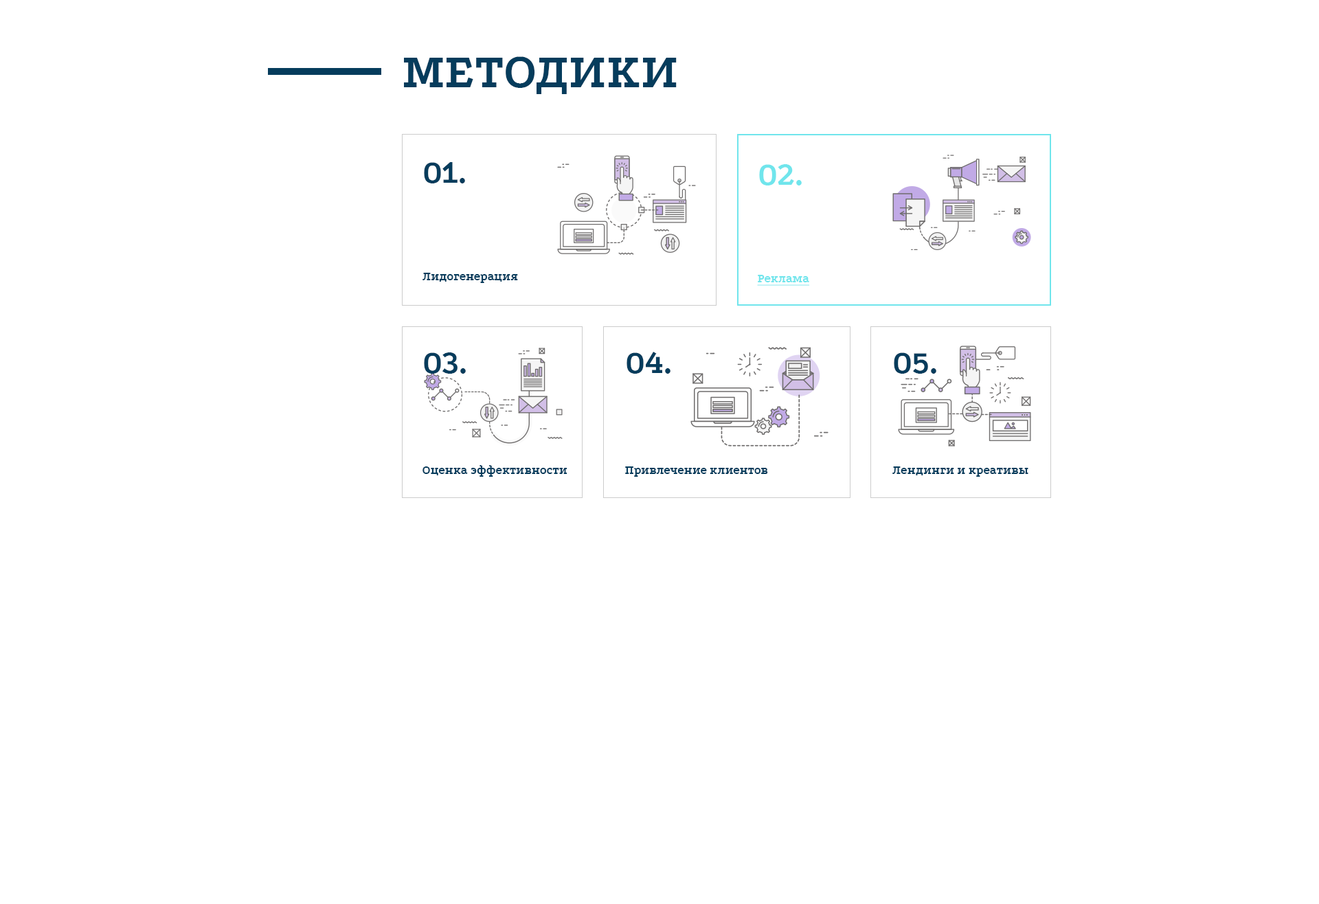
<style>
.page{position:relative;width:1319px;height:904px;background:#ffffff}
.page>*{position:absolute;margin:0}
.t1{font:49.5px "Podkova-Bold";color:#053c5c;text-transform:uppercase}
.t2{font:33px "Podkova-Bold";color:#053c5c}
.t3{font:33px "Podkova-Bold";color:#70e5ec}
.t4{font:12.4px "Podkova-Bold";color:#053c5c}
.t5{font:12.4px "Podkova-Bold";color:#70e5ec;text-decoration:underline}
</style>
<div class="page">
<p class="t1" style="left:404px;top:56px;width:273px;height:38px">методики</p>
<p class="t2" style="left:424px;top:162px;width:41px;height:21px">01.</p>
<p class="t3" style="left:759px;top:164px;width:43px;height:21px">02.</p>
<p class="t4" style="left:422px;top:273px;width:96px;height:10px">Лидогенерация</p>
<p class="t5" style="left:757px;top:275px;width:53px;height:11px">Реклама</p>
<p class="t2" style="left:424px;top:352px;width:42px;height:22px">03.</p>
<p class="t2" style="left:627px;top:352px;width:43px;height:22px">04.</p>
<p class="t2" style="left:894px;top:352px;width:42px;height:22px">05.</p>
<p class="t4" style="left:422px;top:465px;width:145px;height:12px">Оценка эффективности</p>
<p class="t4" style="left:625px;top:466px;width:143px;height:11px">Привлечение клиентов</p>
<p class="t4" style="left:892px;top:466px;width:136px;height:11px">Лендинги и креативы</p>
</div>
